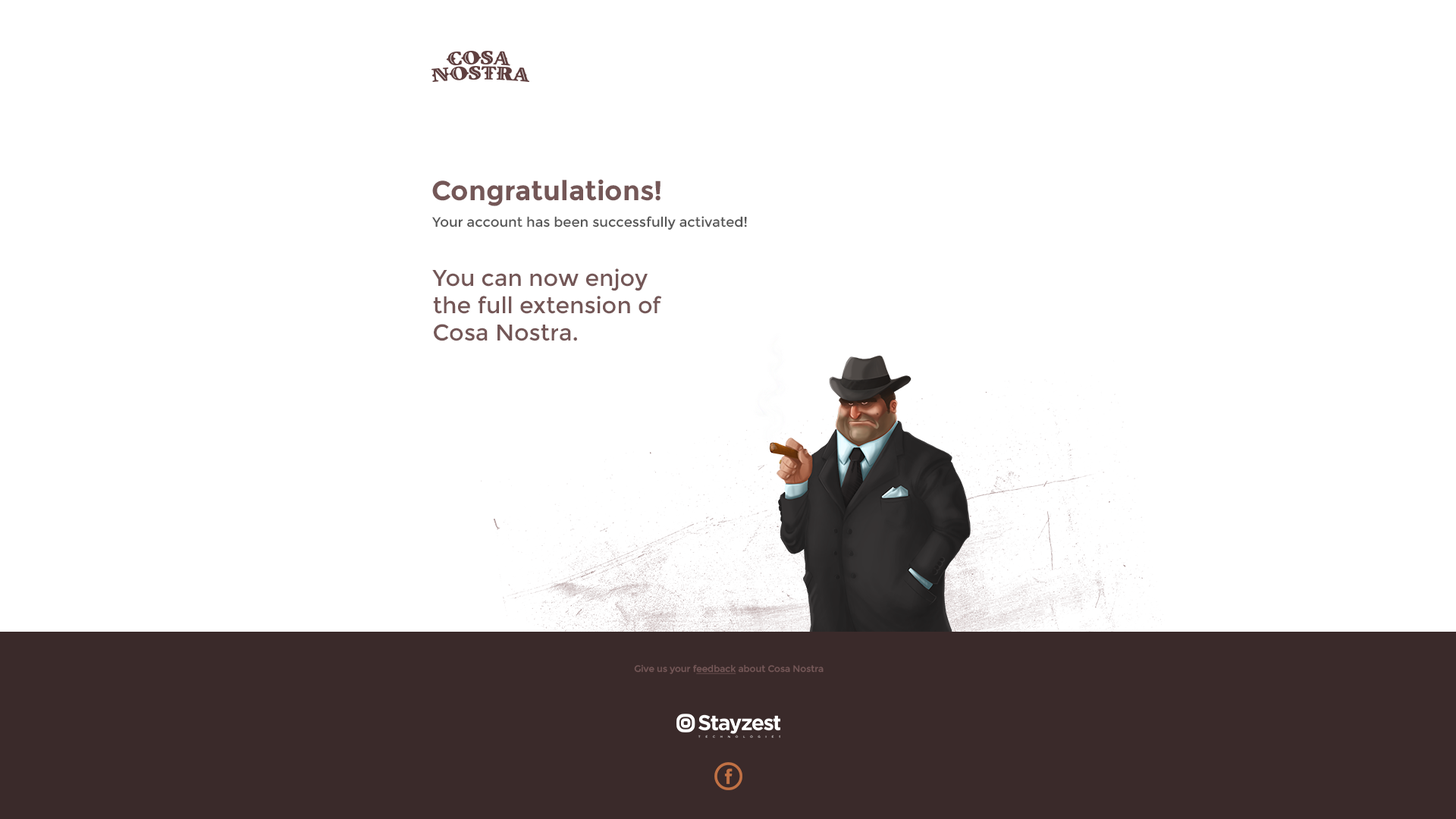
<style>
.page{position:relative;width:1456px;height:819px;background:#ffffff}
.page>*{position:absolute;margin:0}
.t1{font:27.3px "Montserrat-Bold";color:#745757}
.t2{font:13.6px "Montserrat-Regular";color:#565656}
.t3{font:22.7px "Montserrat-Regular";color:#745757}
.t4{font:9.1px "Montserrat-Regular";color:#745757}
.t5{font:9.1px "Montserrat-Regular";color:#745757;text-decoration:underline}
</style>
<div class="page">
<p class="t1" style="left:432px;top:179px;width:228px;height:27px">Congratulations!</p>
<p class="t2" style="left:431px;top:216px;width:316px;height:14px">Your account has been successfully activated!</p>
<p class="t3" style="left:432px;top:268px;width:230px;height:73px">You can now enjoy<br>the full extension of <br>Cosa Nostra.</p>
<p class="t4" style="left:634px;top:664px;width:190px;height:10px">Give us your f<span class="t5">eedback</span> about Cosa Nostra</p>
</div>
